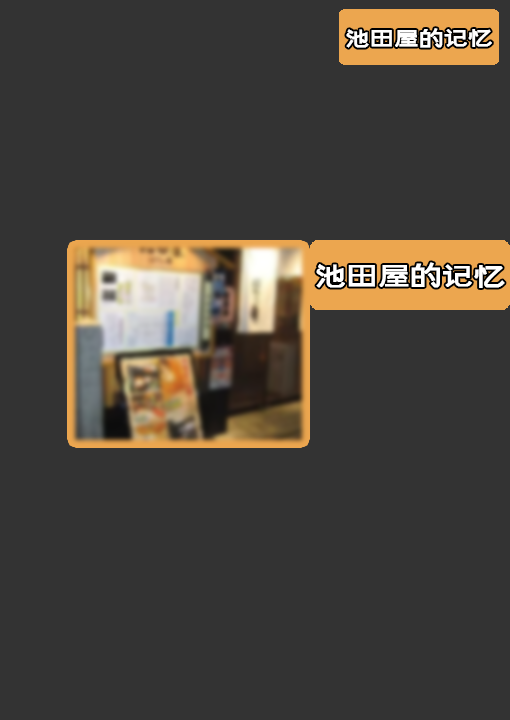
<style>
.page{position:relative;width:510px;height:720px;background:#333333}
.page>*{position:absolute;margin:0}
.t1{font:24px "LeeeafHei-Regular";color:#fefefe;font-weight:bold}
.t2{font:31px "LeeeafHei-Regular";color:#ffffff;font-weight:bold}
</style>
<div class="page">
<p class="t1" style="left:346px;top:28px;width:146px;height:20px">池田屋的记忆</p>
<p class="t2" style="left:316px;top:262px;width:189px;height:26px">池田屋的记忆</p>
</div>
